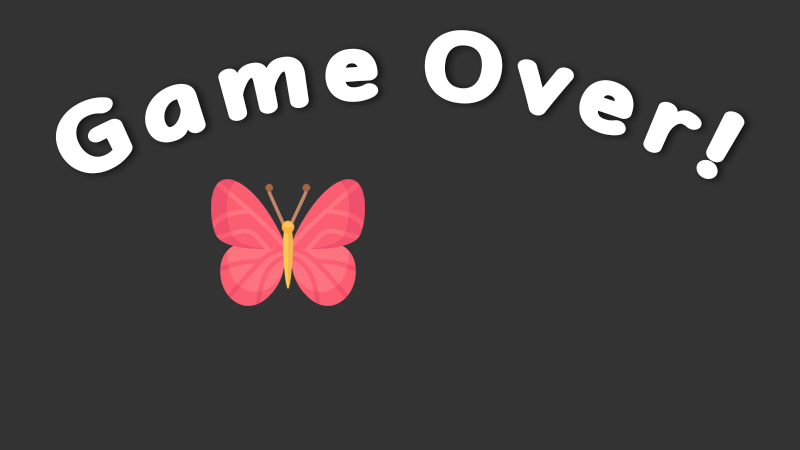
<style>
.page{position:relative;width:800px;height:450px;background:#333333}
.page>*{position:absolute;margin:0}
.t1{font:100px "RobagaRoundedBlack";letter-spacing:0.025em;color:#ffffff}
</style>
<div class="page">
<p class="t1" style="left:55px;top:30px;width:690px;height:149px">Game Over!</p>
</div>
